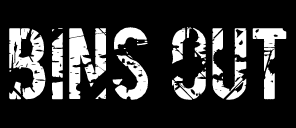
<style>
.page{position:relative;width:296px;height:128px;background:#000000}
.page>*{position:absolute;margin:0}
.t1{font:84px "Gesso";color:#ffffff}
</style>
<div class="page">
<p class="t1" style="left:9px;top:27px;width:278px;height:73px">BINs OUT</p>
</div>
